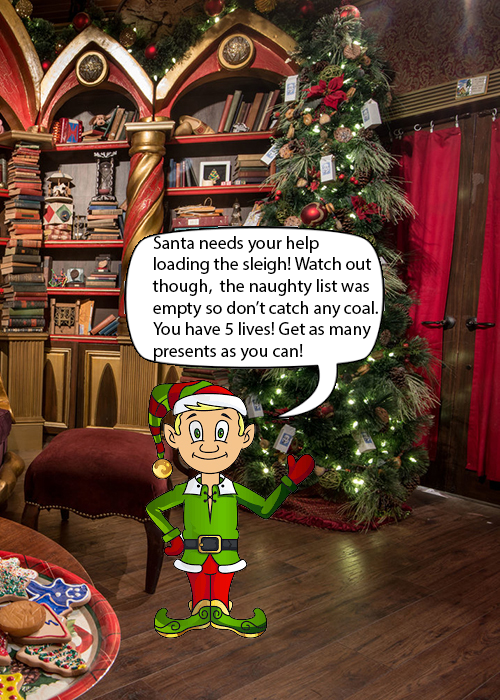
<style>
.page{position:relative;width:500px;height:700px}
.page>*{position:absolute;margin:0}
.t1{font:18px "MyriadPro-Regular";color:#000000}
</style>
<div class="page">
<p class="t1" style="left:152px;top:236px;width:226px;height:125px">Santa needs your help<br>loading the sleigh! Watch out<br>though,  the naughty list was <br>empty so don’t catch any coal. <br>You have 5 lives! Get as many <br>presents as you can!</p>
</div>
